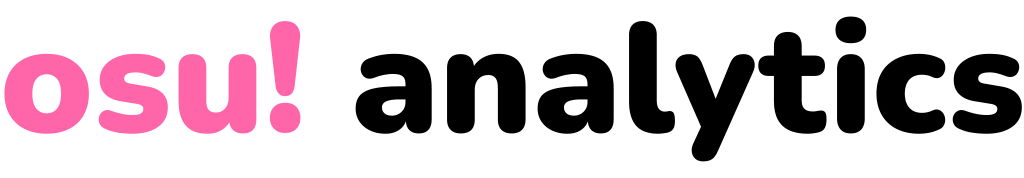
<style>
.page{position:relative;width:1024px;height:178px;background:#ffffff}
.page>*{position:absolute;margin:0}
.t1{font:155.3px "Nunito-Black";color:#000000}
.t2{font:155.3px "Nunito-Black";color:#ff66aa}
</style>
<div class="page">
<p class="t1" style="left:4px;top:16px;width:1018px;height:146px"><span class="t2">osu!</span> analytics</p>
</div>
